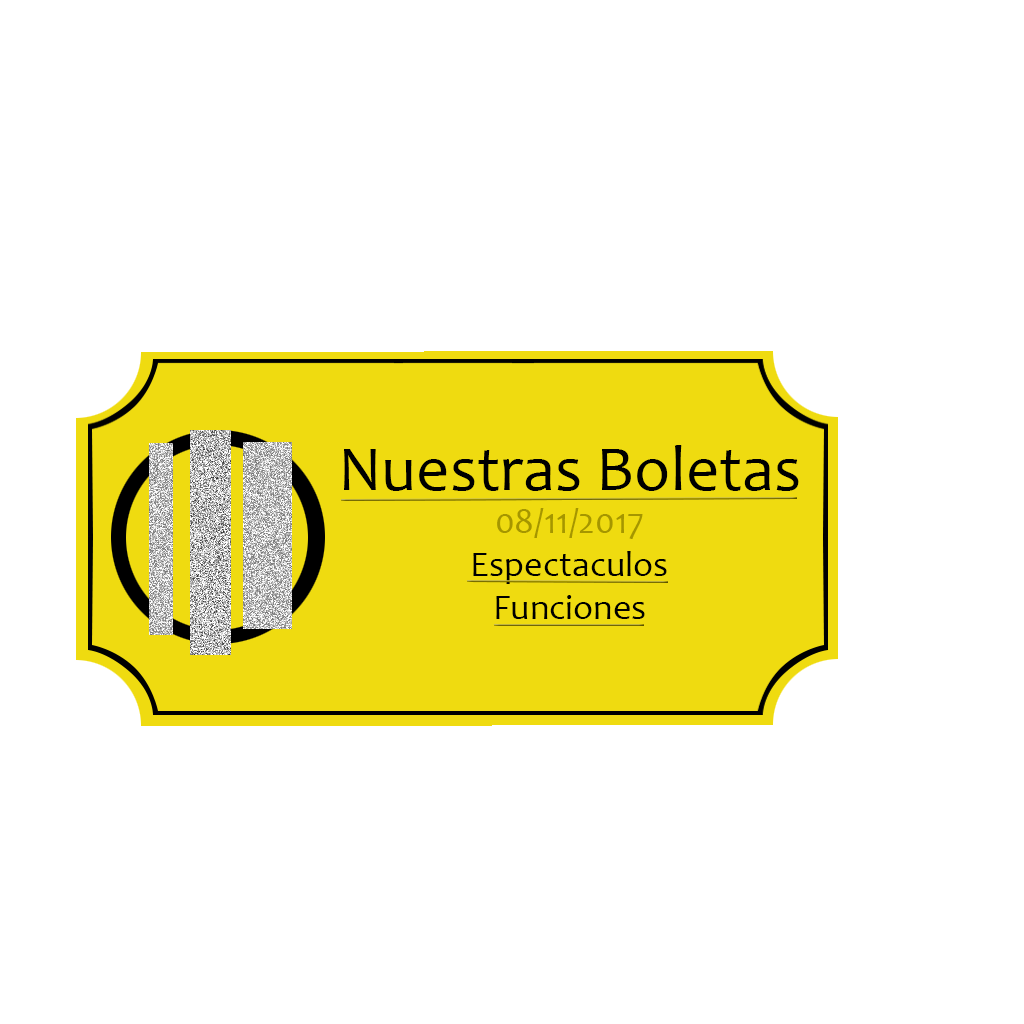
<style>
.page{position:relative;width:1024px;height:1024px;background:#ffffff}
.page>*{position:absolute;margin:0}
.t1{font:36px "Candara";color:#000000}
.t2{font:65px "Candara";color:#000000}
.t3{font:36px "Candara";color:#a59600}
</style>
<div class="page">
<p class="t1" style="left:344px;top:445px;width:455px;height:174px;text-align:center"><span class="t2">Nuestras Boletas<br></span><span class="t3">08/11/2017<br></span>Espectaculos<br>Funciones</p>
</div>
